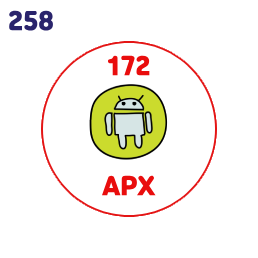
<style>
.page{position:relative;width:258px;height:258px;background:#ffffff}
.page>*{position:absolute;margin:0}
.t1{font:24px "Jalnan";color:#2a246c}
.t2{font:24px "Jalnan";color:#e90d0d}
</style>
<div class="page">
<p class="t1" style="left:9px;top:10px;width:44px;height:21px">258</p>
<p class="t2" style="left:107px;top:55px;width:43px;height:21px">172</p>
<p class="t2" style="left:102px;top:175px;width:54px;height:21px">APX</p>
</div>
